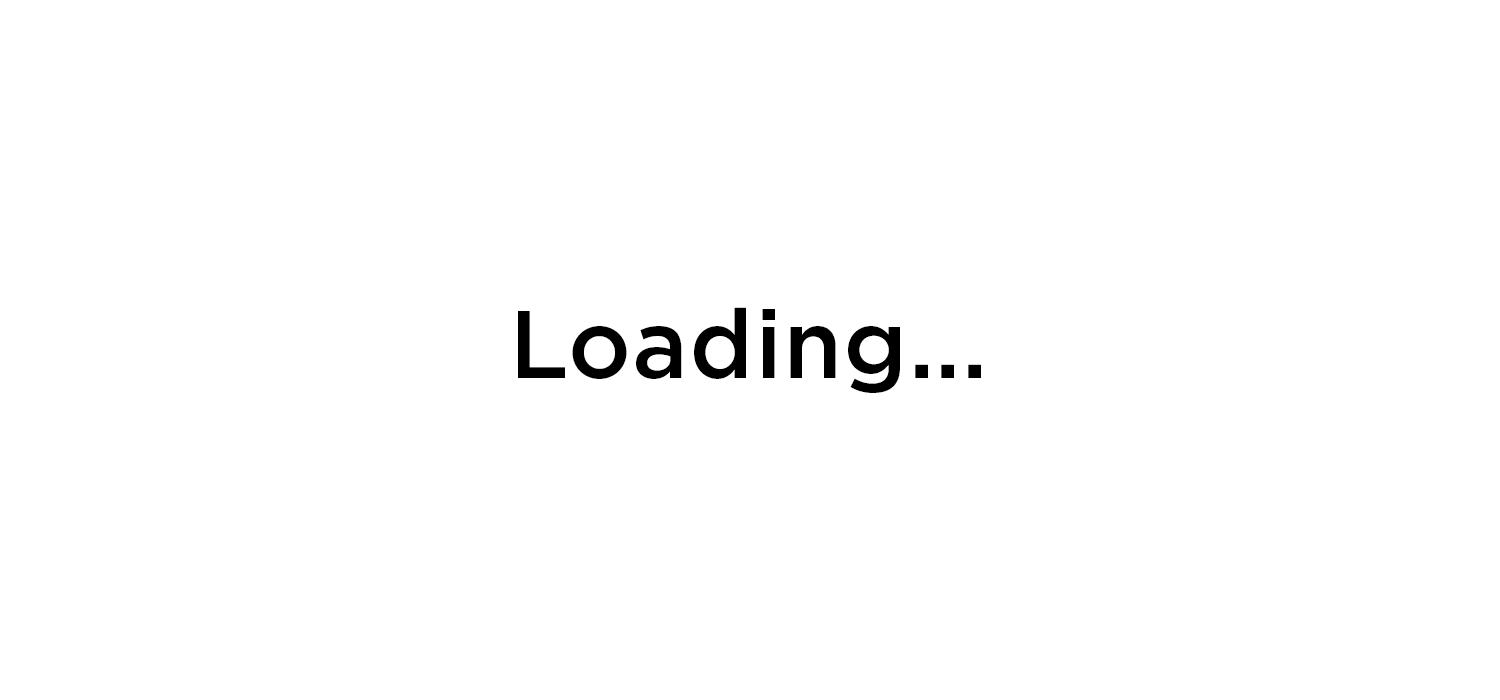
<style>
.page{position:relative;width:1500px;height:700px;background:#ffffff}
.page>*{position:absolute;margin:0}
.t1{font:95.8px "Gotham-Medium";letter-spacing:0.01em;color:#000000}
</style>
<div class="page">
<p class="t1" style="left:518px;top:307px;width:463px;height:86px">Loading...</p>
</div>
